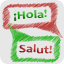
<style>
.page{position:relative;width:64px;height:64px;background:#e7e7e7}
.page>*{position:absolute;margin:0}
.t1{font:11.3px "Candara-Bold";scale:1.23 1}
.t2{font:11.3px "Candara-Bold";scale:1.21 1}
</style>
<div class="page">
<p class="t1" style="left:13px;top:9px;width:34px;height:12px;rotate:-3deg">¡Hola!</p>
<p class="t2" style="left:19px;top:44px;width:33px;height:10px;rotate:3deg">Salut!</p>
</div>
